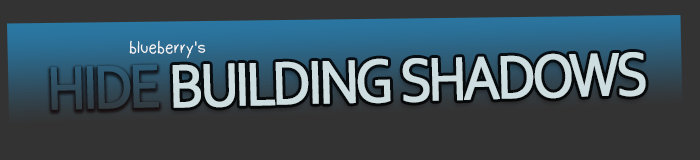
<style>
.page{position:relative;width:700px;height:160px;background:#333333}
.page>*{position:absolute;margin:0}
.t1{font:18px "Dudu_Calligraphy";color:#fbfbfb}
.t2{font:64px "Corbel";letter-spacing:-0.075em;color:#cedee0;font-variant:small-caps;font-weight:bold;scale:0.9 1}
.t3{font:64px "Corbel";letter-spacing:-0.075em;font-weight:bold;scale:0.9 1}
</style>
<div class="page">
<p class="t1" style="left:129px;top:40px;width:77px;height:19px">blueberry's</p>
<p class="t2" style="left:172px;top:52px;width:474px;height:56px;rotate:-2deg">BUILDING SHADOWS</p>
<p class="t3" style="left:50px;top:64px;width:109px;height:46px;rotate:-2deg">HIDE</p>
</div>
